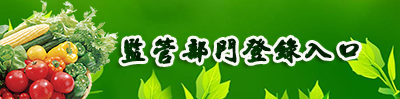
<style>
.page{position:relative;width:400px;height:99px}
.page>*{position:absolute;margin:0}
.t1{font:30px "SunYatsenHsingshu-";color:#022801;font-weight:bold}
</style>
<div class="page">
<p class="t1" style="left:121px;top:37px;width:238px;height:27px">监管部门登录入口</p>
</div>
